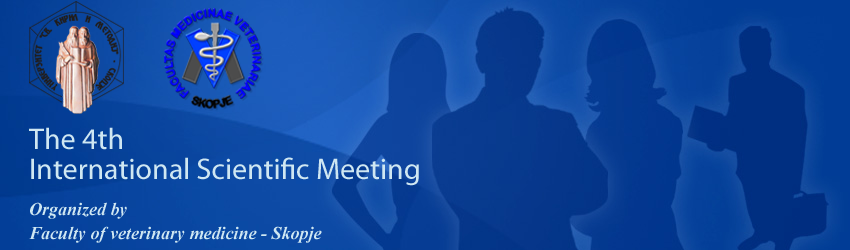
<style>
.page{position:relative;width:850px;height:250px}
.page>*{position:absolute;margin:0}
.t1{font:18px/24px "TimesNewRomanPS-BoldItalicMT";color:#cfe7f2}
.t2{font:30px/39.8px "MyriadPro-Regular";color:#cfe7f2}
.t3{font:30px/30px "MyriadPro-Regular";color:#cfe7f2}
.t4{font:18px/18px "TimesNewRomanPS-BoldItalicMT";color:#cfe7f2}
</style>
<div class="page">
<p class="t1" style="left:29px;top:127px;width:390px;height:116px"><span class="t2">The 4th <br></span><span class="t3">International Scientific Meeting<br><br></span><span class="t4">Organized by <br></span>Faculty of veterinary medicine - Skopje</p>
</div>
